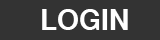
<style>
.page{position:relative;width:160px;height:40px;background:#333333}
.page>*{position:absolute;margin:0}
.t1{font:28.2px "SansSerifBold";color:#ffffff;text-transform:uppercase}
</style>
<div class="page">
<p class="t1" style="left:42px;top:9px;width:86px;height:21px">LOGIN</p>
</div>
